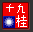
<style>
.page{position:relative;width:33px;height:32px;background:#f20000}
.page>*{position:absolute;margin:0}
.t1{font:10.4px "SimSun";color:#ffffff}
.t2{font:11.7px "SimSun";color:#ffffff}
</style>
<div class="page">
<p class="t1" style="left:6px;top:4px;width:19px;height:9px">十九</p>
<p class="t2" style="left:16px;top:15px;width:11px;height:12px">桂</p>
</div>
